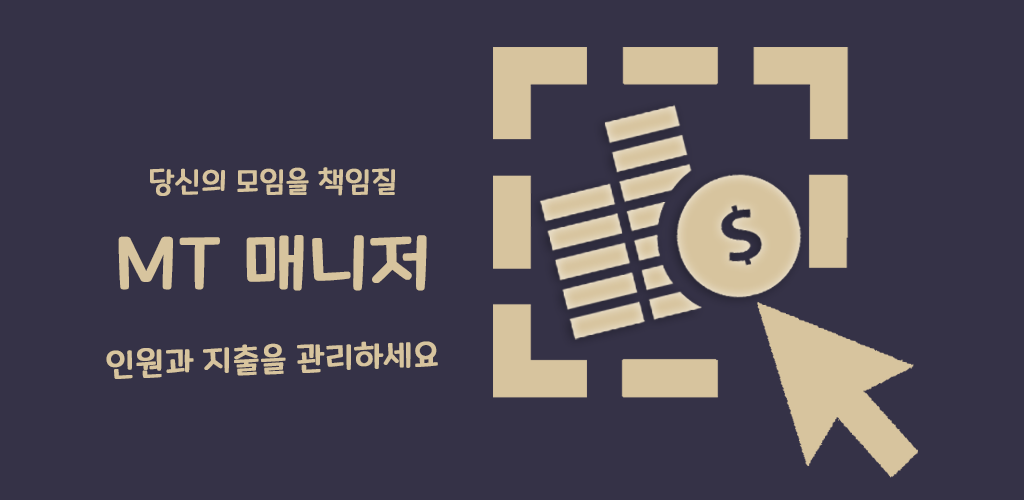
<style>
.page{position:relative;width:1024px;height:500px;background:#353247}
.page>*{position:absolute;margin:0}
.t1{font:29px "MaplestoryLight";color:#d7c49e;font-weight:bold}
.t2{font:70px "MaplestoryLight";color:#d7c49e;font-weight:bold}
.t3{font:32.3px "MaplestoryLight";color:#d7c49e;font-weight:bold}
</style>
<div class="page">
<p class="t1" style="left:150px;top:167px;width:245px;height:29px">당신의 모임을 책임질</p>
<p class="t2" style="left:118px;top:235px;width:309px;height:56px">MT 매니저</p>
<p class="t3" style="left:106px;top:341px;width:332px;height:38px;rotate:-2deg">인원과 지출을 관리하세요</p>
</div>
